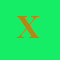
<style>
.page{position:relative;width:60px;height:60px;background:#15ed67}
.page>*{position:absolute;margin:0}
.t1{font:33.3px "TimesNewRomanPS-BoldMT";color:#af8916}
</style>
<div class="page">
<p class="t1" style="left:16px;top:16px;width:24px;height:22px">X</p>
</div>
